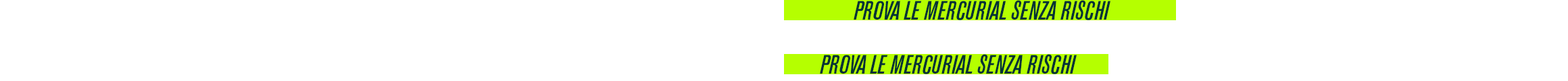
<style>
.page{position:relative;width:1568px;height:81px;background:#ffffff}
.page>*{position:absolute;margin:0}
.t1{font:26.4px "AkzidenzGrotConBQ-MediumItalic";letter-spacing:-0.02em;color:#013134;text-transform:uppercase}
</style>
<div class="page">
<p class="t1" style="left:854px;top:0px;width:256px;height:20px">PROVA LE MERCURIAL SENZA RISCHI</p>
<p class="t1" style="left:820px;top:54px;width:257px;height:20px">PROVA LE MERCURIAL SENZA RISCHI</p>
</div>
